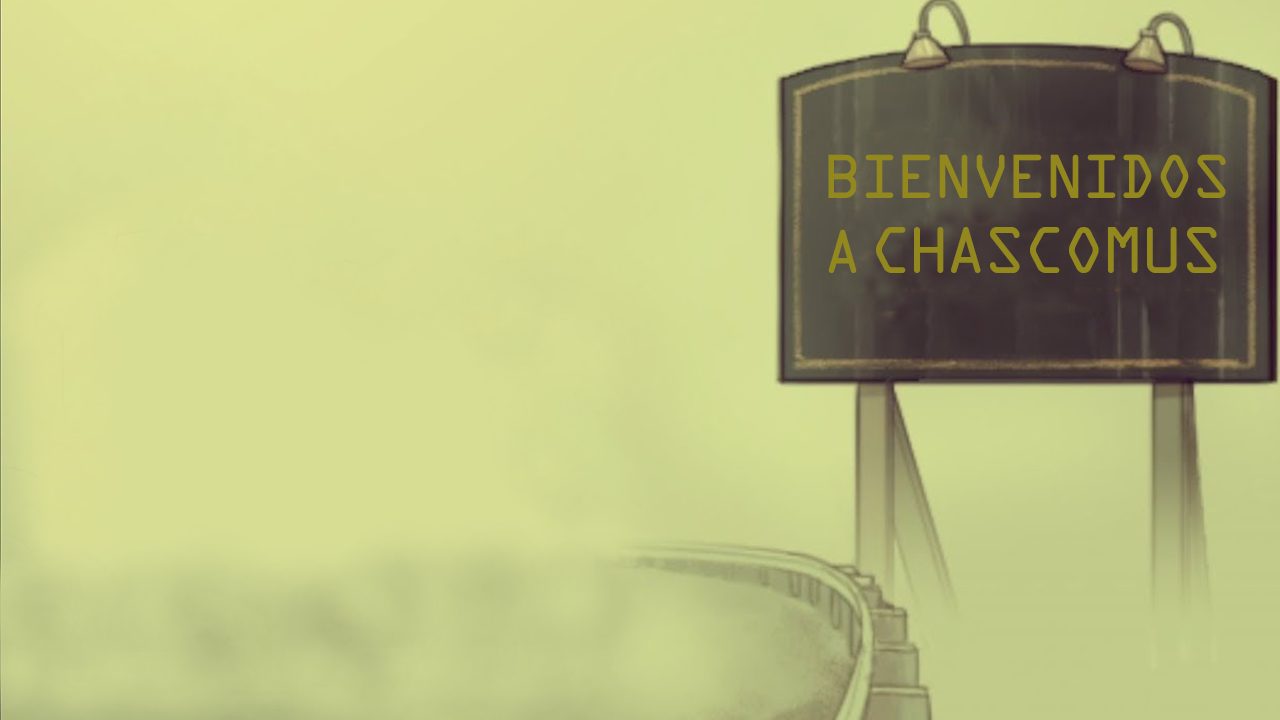
<style>
.page{position:relative;width:1280px;height:720px}
.page>*{position:absolute;margin:0}
.t1{font:66.7px "OCRAExtended";letter-spacing:-0.05em;color:#92881e}
.t2{font:66.7px "OCRAExtended";letter-spacing:-0.25em;color:#92881e}
.t3{font:70.8px "OCRAExtended";letter-spacing:-0.075em;color:#92881e}
.t4{font:70.8px "OCRAExtended";letter-spacing:-0.05em;color:#92881e}
</style>
<div class="page">
<p class="t1" style="left:828px;top:154px;width:398px;height:119px">BIENVENIDOS <span class="t2">A </span><span class="t3">CH</span><span class="t4">ASCOMUS</span></p>
</div>
